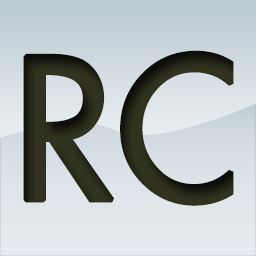
<style>
.page{position:relative;width:256px;height:256px}
.page>*{position:absolute;margin:0}
.t1{font:190.4px "FuturaLT";color:#323220;font-weight:bold;scale:0.96 1}
</style>
<div class="page">
<p class="t1" style="left:23px;top:50px;width:211px;height:156px">RC</p>
</div>
